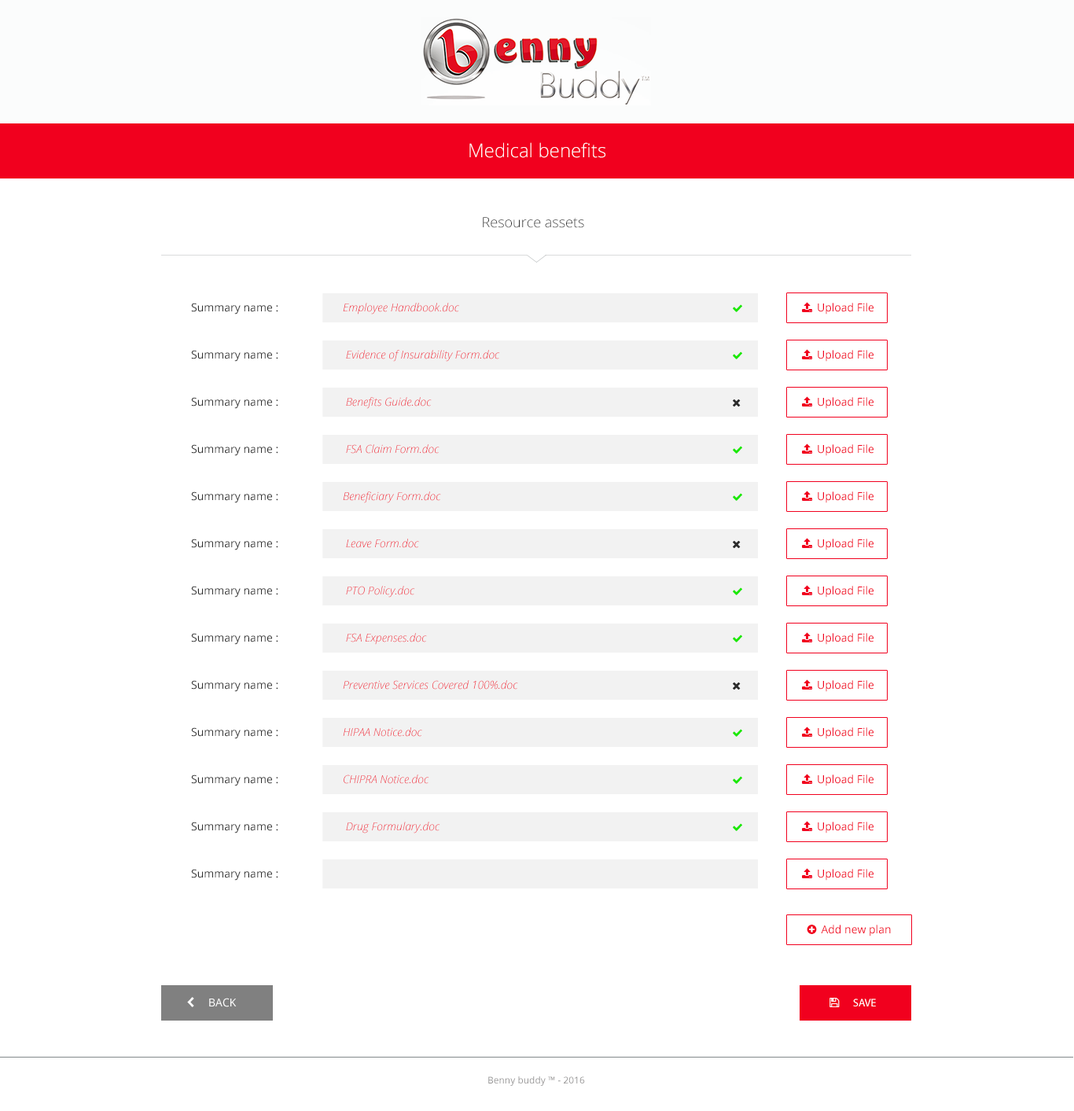
<style>
.page{position:relative;width:1074px;height:1111px;background:#ffffff}
.page>*{position:absolute;margin:0}
.t1{font:18.9px "OpenSans-Light";color:#ffffff}
.t2{font:14.1px "OpenSans-Light";color:#2e2e2e}
.t3{font:11px "OpenSans";color:#2e2e2e}
.t4{font:11px "OpenSansLight-Italic";color:#f1001e}
.t5{font:11px "OpenSansLight-Italic"}
.t6{font:9.4px "OpenSans";color:#979696}
</style>
<div class="page">
<p class="t1" style="left:469px;top:142px;width:136px;height:16px">Medical benefits</p>
<p class="t2" style="left:483px;top:217px;width:101px;height:11px">Resource assets</p>
<p class="t3" style="left:191px;top:303px;width:87px;height:11px">Summary name :</p>
<p class="t4" style="left:343px;top:303px;width:116px;height:11px">Employee Handbook.doc</p>
<p class="t3" style="left:191px;top:350px;width:87px;height:12px">Summary name :</p>
<p class="t5" style="left:346px;top:350px;width:154px;height:12px">Evidence of Insurability Form.doc</p>
<p class="t3" style="left:191px;top:397px;width:87px;height:12px">Summary name :</p>
<p class="t5" style="left:346px;top:397px;width:86px;height:12px">Benefits Guide.doc</p>
<p class="t3" style="left:191px;top:444px;width:87px;height:12px">Summary name :</p>
<p class="t5" style="left:346px;top:444px;width:93px;height:10px">FSA Claim Form.doc</p>
<p class="t3" style="left:191px;top:491px;width:87px;height:12px">Summary name :</p>
<p class="t5" style="left:343px;top:491px;width:98px;height:12px">Beneficiary Form.doc</p>
<p class="t3" style="left:191px;top:538px;width:87px;height:12px">Summary name :</p>
<p class="t4" style="left:346px;top:538px;width:73px;height:10px">Leave Form.doc</p>
<p class="t3" style="left:191px;top:586px;width:87px;height:11px">Summary name :</p>
<p class="t5" style="left:346px;top:586px;width:69px;height:11px">PTO Policy.doc</p>
<p class="t3" style="left:191px;top:633px;width:87px;height:12px">Summary name :</p>
<p class="t5" style="left:346px;top:633px;width:81px;height:12px">FSA Expenses.doc</p>
<p class="t3" style="left:191px;top:680px;width:87px;height:12px">Summary name :</p>
<p class="t5" style="left:343px;top:680px;width:175px;height:9px">Preventive Services Covered 100%.doc</p>
<p class="t3" style="left:191px;top:727px;width:87px;height:12px">Summary name :</p>
<p class="t4" style="left:343px;top:727px;width:79px;height:9px">HIPAA Notice.doc</p>
<p class="t3" style="left:191px;top:774px;width:87px;height:12px">Summary name :</p>
<p class="t5" style="left:343px;top:774px;width:86px;height:10px">CHIPRA Notice.doc</p>
<p class="t3" style="left:191px;top:821px;width:87px;height:12px">Summary name :</p>
<p class="t5" style="left:346px;top:821px;width:94px;height:12px">Drug Formulary.doc</p>
<p class="t3" style="left:191px;top:869px;width:87px;height:11px">Summary name :</p>
<p class="t6" style="left:488px;top:1076px;width:97px;height:9px">Benny buddy ™ - 2016</p>
</div>
